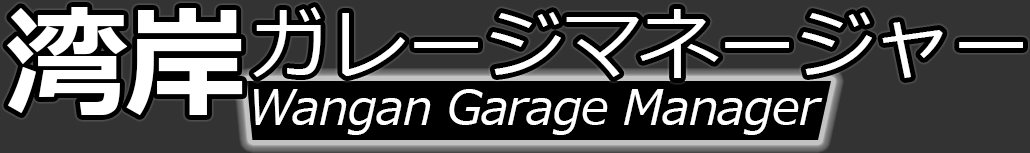
<style>
.page{position:relative;width:1030px;height:153px;background:#333333}
.page>*{position:absolute;margin:0}
.t1{font:122px "Meiryo-Bold";letter-spacing:-0.02em;color:#ffffff}
.t2{font:79.4px "Meiryo";letter-spacing:-0.02em;color:#ffffff}
.t3{font:48px "Meiryo-Italic";letter-spacing:-0.02em;color:#ffffff}
</style>
<div class="page">
<p class="t1" style="left:7px;top:7px;width:236px;height:108px">湾岸</p>
<p class="t2" style="left:253px;top:7px;width:770px;height:71px">ガレージマネージャー</p>
<p class="t3" style="left:254px;top:89px;width:569px;height:46px">Wangan Garage Manager</p>
</div>
